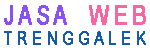
<style>
.page{position:relative;width:150px;height:50px;background:#ffffff}
.page>*{position:absolute;margin:0}
.t1{font:27.3px "ArialNarrow";letter-spacing:0.15em;color:#8950f5;text-transform:uppercase;font-weight:bold;scale:0.92 1}
.t2{font:27.3px "ArialNarrow";letter-spacing:0.15em;color:#f765a3;text-transform:uppercase;font-weight:bold;scale:0.92 1}
.t3{font:18.2px "ArialNarrow";letter-spacing:0.25em;color:#165baa;text-transform:uppercase;font-weight:bold;scale:0.92 1}
</style>
<div class="page">
<p class="t1" style="left:4px;top:5px;width:63px;height:20px">Jasa</p>
<p class="t2" style="left:89px;top:5px;width:57px;height:20px">web</p>
<p class="t3" style="left:4px;top:31px;width:142px;height:14px">trenggalek</p>
</div>
